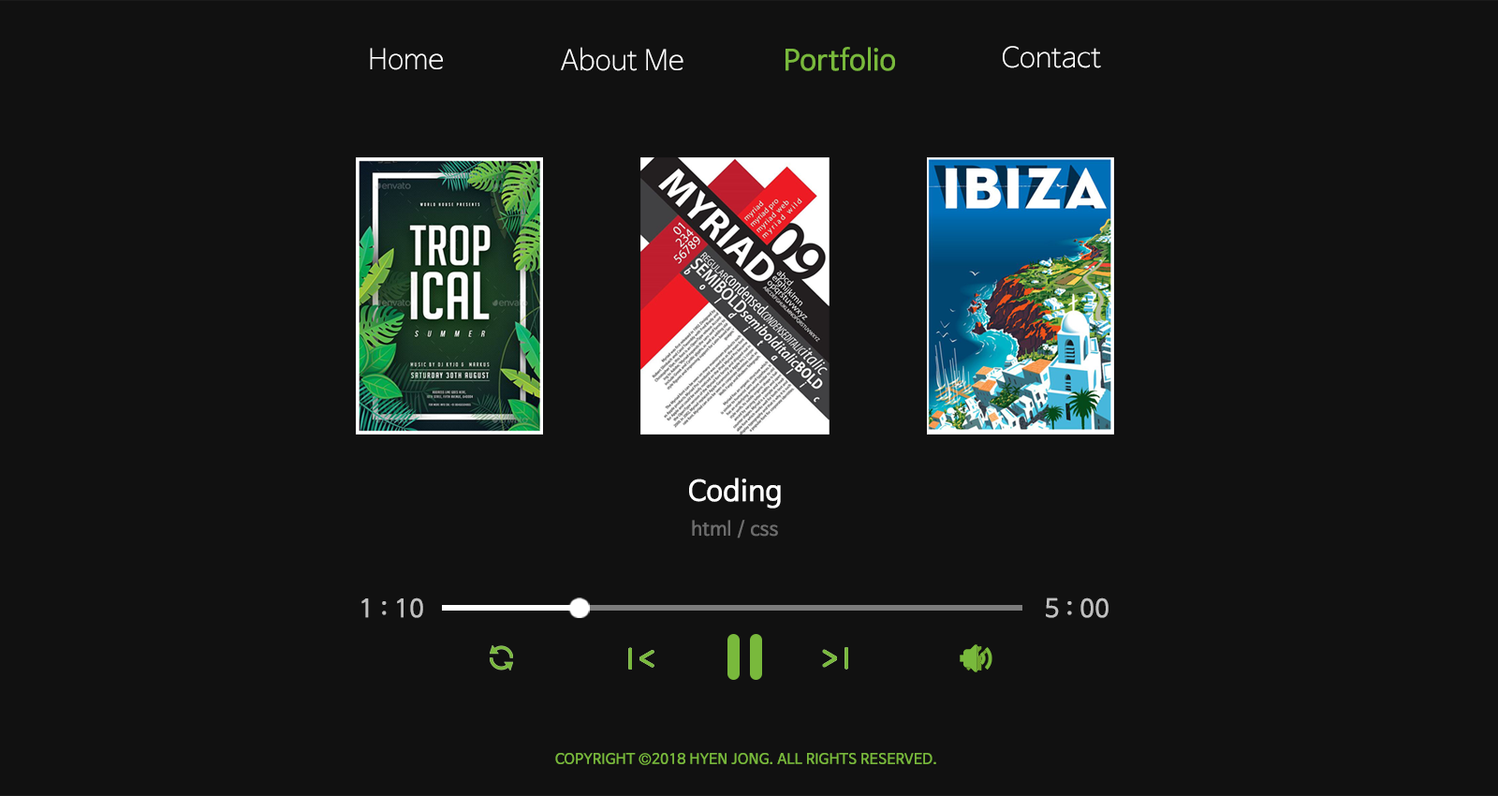
<style>
.page{position:relative;width:1498px;height:796px;background:#111111}
.page>*{position:absolute;margin:0}
.t1{font:28.1px "NanumBarunGothicLight";color:#ffffff}
.t2{font:28.1px "NanumBarunGothic";color:#79b93c;font-weight:bold}
.t3{font:28.1px "NanumBarunGothic";color:#ffffff;font-weight:bold}
.t4{font:18.7px "NanumBarunGothic";color:#6d6d6d;font-weight:bold}
.t5{font:24.4px "NanumBarunGothic";color:#c0c0c0;font-weight:bold}
.t6{font:14px "NanumBarunGothic";color:#79b93c;font-weight:bold}
</style>
<div class="page">
<p class="t1" style="left:370px;top:48px;width:73px;height:22px">Home</p>
<p class="t1" style="left:561px;top:47px;width:123px;height:24px">About Me</p>
<p class="t2" style="left:786px;top:47px;width:109px;height:24px">Portfolio</p>
<p class="t1" style="left:1003px;top:46px;width:98px;height:22px">Contact</p>
<p class="t3" style="left:689px;top:478px;width:92px;height:30px">Coding</p>
<p class="t4" style="left:692px;top:520px;width:86px;height:18px">html / css</p>
<p class="t5" style="left:361px;top:597px;width:62px;height:21px">1 : 10</p>
<p class="t5" style="left:1046px;top:597px;width:63px;height:21px">5 : 00</p>
<p class="t6" style="left:555px;top:753px;width:381px;height:12px">COPYRIGHT ©2018 HYEN JONG. ALL RIGHTS RESERVED.</p>
</div>
